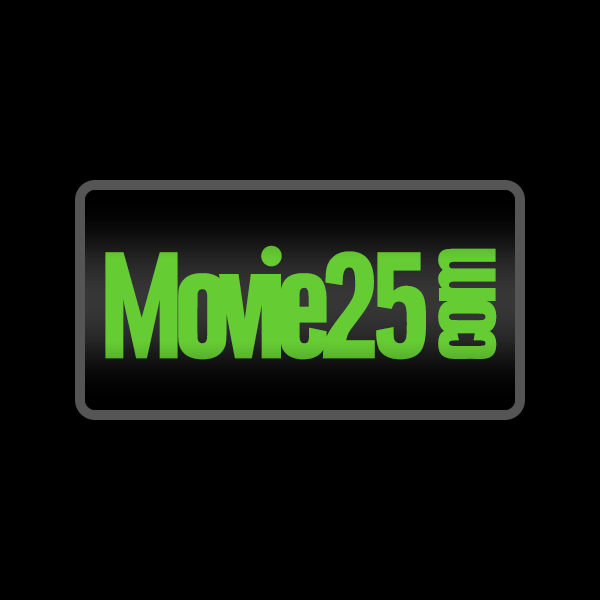
<style>
.page{position:relative;width:600px;height:600px;background:#000000}
.page>*{position:absolute;margin:0}
.t1{font:158.6px "URWGroteskTOT-BoldCondensed";letter-spacing:-0.08em;color:#66cc33}
.t2{font:106px "URWGroteskTOT-BoldCondensed";letter-spacing:-0.08em;color:#66cc33}
</style>
<div class="page">
<p class="t1" style="left:105px;top:245px;width:321px;height:115px">Movie25</p>
<p class="t2" style="left:438px;top:248px;width:59px;height:111px;rotate:-90deg">com</p>
</div>
